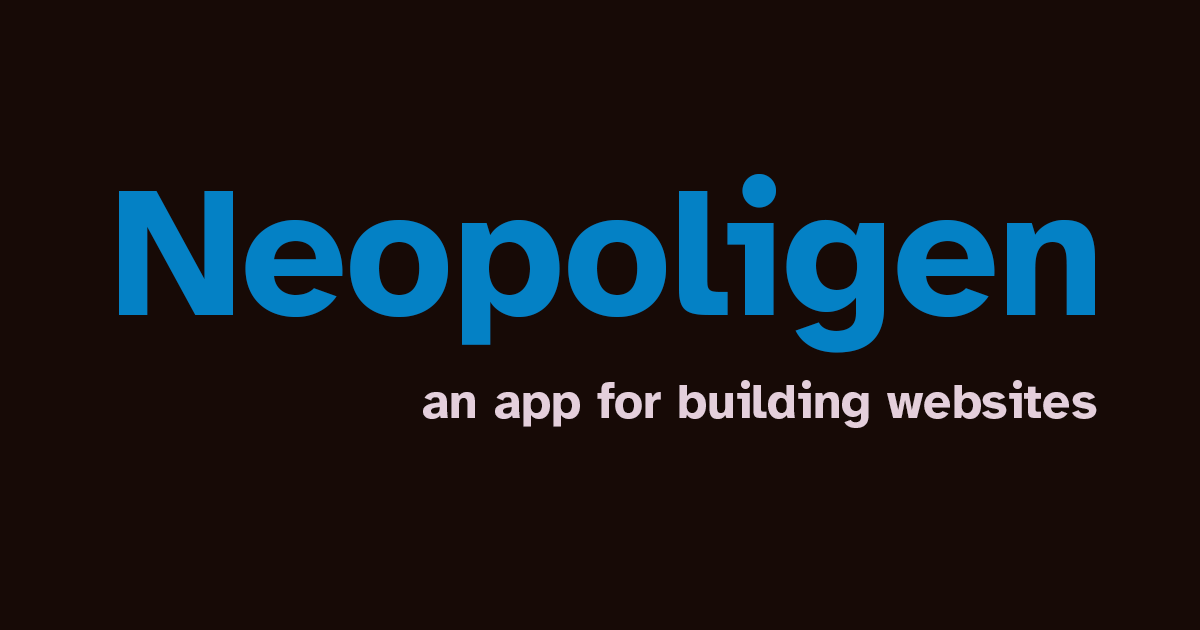
<style>
.page{position:relative;width:1200px;height:630px;background:#170a06}
.page>*{position:absolute;margin:0}
.t1{font:186px "AtkinsonHyperlegible-Bold";color:#0481c5}
.t2{font:50px "AtkinsonHyperlegible-Bold";color:#e4cfdb}
</style>
<div class="page">
<p class="t1" style="left:119px;top:174px;width:976px;height:179px">Neopoligen</p>
<p class="t2" style="left:423px;top:380px;width:674px;height:48px">an app for building websites</p>
</div>
